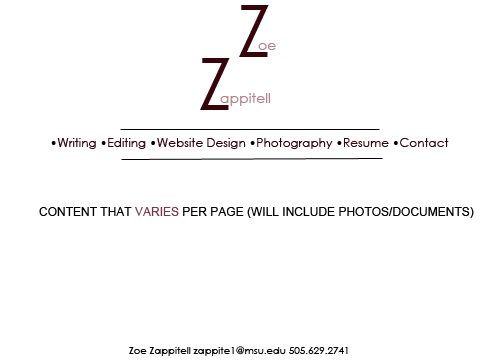
<style>
.page{position:relative;width:504px;height:360px;background:#ffffff}
.page>*{position:absolute;margin:0}
.t1{font:72px "CenturyGothic";color:#38040b}
.t2{font:14px "CenturyGothic";color:#b88189}
.t3{font:12px "CenturyGothic";color:#38040b}
.t4{font:12px "CenturyGothic";color:#010000}
.t5{font:12px "CenturyGothic";color:#000000}
.t6{font:12px "ArialMT";color:#000000}
.t7{font:12px "ArialMT";color:#793841}
.t8{font:10px "CenturyGothic";color:#000000}
</style>
<div class="page">
<p class="t1" style="left:239px;top:5px;width:30px;height:52px">Z</p>
<p class="t2" style="left:258px;top:43px;width:18px;height:7px">oe</p>
<p class="t1" style="left:200px;top:58px;width:30px;height:52px">Z</p>
<p class="t2" style="left:220px;top:93px;width:50px;height:13px">appitell</p>
<p class="t3" style="left:51px;top:138px;width:398px;height:11px"><span class="t4">•</span>Writing <span class="t5">•</span>Editing <span class="t4">•</span>Website Design <span class="t5">•</span>Photography <span class="t4">•</span>Resume <span class="t5">•</span>Contact</p>
<p class="t6" style="left:39px;top:207px;width:435px;height:11px">CONTENT THAT <span class="t7">VARIES</span> PER PAGE (WILL INCLUDE PHOTOS/DOCUMENTS)</p>
<p class="t8" style="left:129px;top:346px;width:219px;height:10px">Zoe Zappitell zappite1@msu.edu 505.629.2741</p>
</div>
